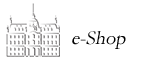
<style>
.page{position:relative;width:148px;height:60px;background:#ffffff}
.page>*{position:absolute;margin:0}
.t1{font:20px "Garamond";color:#000000;font-style:italic}
</style>
<div class="page">
<p class="t1" style="left:72px;top:31px;width:54px;height:18px">e-Shop</p>
</div>
